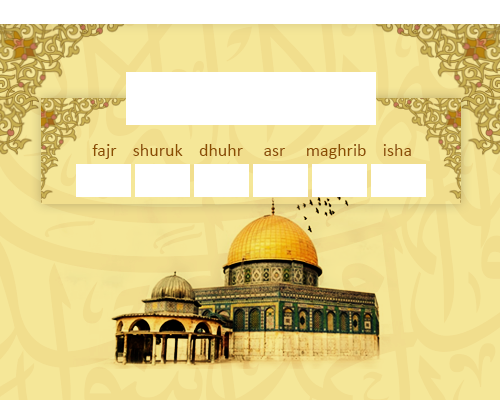
<style>
.page{position:relative;width:500px;height:400px;background:#f5e798}
.page>*{position:absolute;margin:0}
.t1{font:18px "Calibri";color:#8b4e00}
</style>
<div class="page">
<p class="t1" style="left:92px;top:144px;width:319px;height:15px">fajr    shuruk    dhuhr     asr     maghrib    isha</p>
</div>
